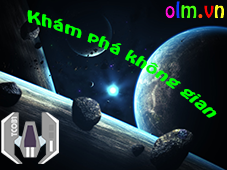
<style>
.page{position:relative;width:227px;height:170px}
.page>*{position:absolute;margin:0}
.t1{font:13px "VNI-Hobo";color:#00ff00;scale:1.6 1}
</style>
<div class="page">
<p class="t1" style="left:27px;top:10px;width:190px;height:108px;rotate:28deg">Khaùm phaù khoâng gian</p>
</div>
